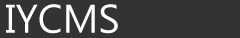
<style>
.page{position:relative;width:240px;height:38px;background:#333333}
.page>*{position:absolute;margin:0}
.t1{font:40px "Gadugi";color:#ffffff}
</style>
<div class="page">
<p class="t1" style="left:6px;top:4px;width:112px;height:30px">IYCMS</p>
</div>
